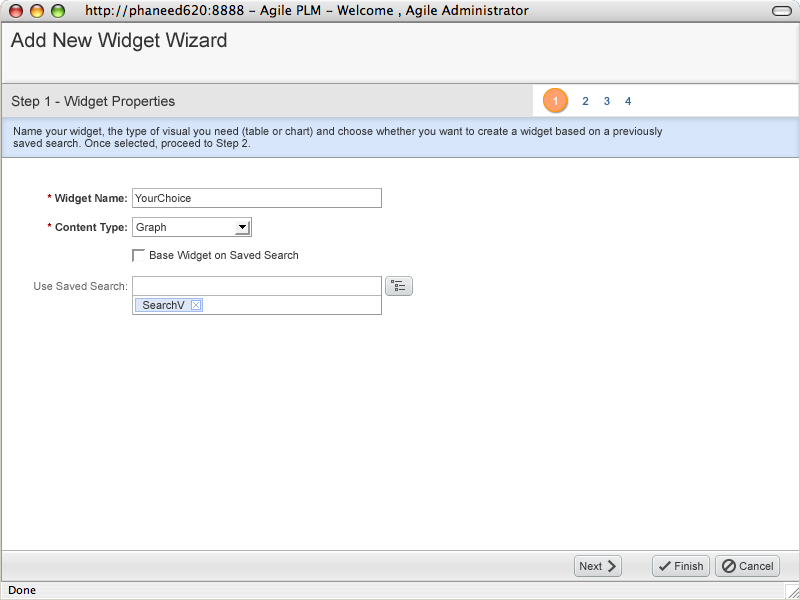
<style>
.page{position:relative;width:800px;height:600px;background:#ffffff}
.page>*{position:absolute;margin:0}
.t1{font:20px "ArialMT";color:#333333}
.t2{font:14px "ArialMT";color:#333333}
.t3{font:11px "ArialMT";color:#ffffff}
.t4{font:11px "ArialMT";color:#336699}
.t5{font:11px/12px "ArialMT";color:#333333}
.t6{font:11px "Arial-BoldMT";color:#333333}
.t7{font:11px "Arial-BoldMT";color:#990000}
.t8{font:11px "ArialMT";color:#333333}
.t9{font:11px "ArialMT";color:#666666}
</style>
<div class="page">
<p class="t1" style="left:10px;top:32px;width:217px;height:20px">Add New Widget Wizard</p>
<p class="t2" style="left:11px;top:95px;width:164px;height:14px">Step 1 - Widget Properties</p>
<p class="t3" style="left:553px;top:96px;width:4px;height:9px">1</p>
<p class="t4" style="left:582px;top:96px;width:49px;height:10px">2     3     4</p>
<p class="t5" style="left:13px;top:127px;width:650px;height:23px">Name your widget, the type of visual you need (table or chart) and choose whether you want to create a widget based on a previously <br>saved search. Once selected, proceed to Step 2.</p>
<p class="t6" style="left:47px;top:194px;width:80px;height:11px"><span class="t7">*</span> Widget Name:</p>
<p class="t8" style="left:135px;top:194px;width:56px;height:8px">YourChoice</p>
<p class="t6" style="left:47px;top:223px;width:80px;height:11px"><span class="t7">* </span>Content Type:</p>
<p class="t8" style="left:136px;top:223px;width:30px;height:11px">Graph</p>
<p class="t8" style="left:150px;top:251px;width:148px;height:11px">Base Widget on Saved Search</p>
<p class="t9" style="left:34px;top:282px;width:93px;height:8px">Use Saved Search:</p>
<p class="t8" style="left:143px;top:301px;width:42px;height:8px">SearchV</p>
<p class="t8" style="left:580px;top:562px;width:22px;height:8px">Next</p>
<p class="t8" style="left:675px;top:562px;width:28px;height:8px">Finish</p>
<p class="t8" style="left:739px;top:562px;width:34px;height:8px">Cancel</p>
</div>
